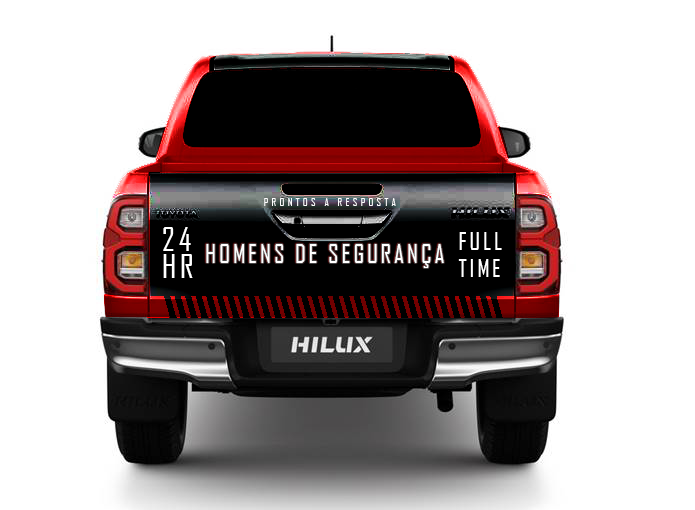
<style>
.page{position:relative;width:695px;height:510px;background:#ffffff}
.page>*{position:absolute;margin:0}
.t1{font:10.7px "AgencyFB-Reg";letter-spacing:0.32em;color:#fefefe}
.t2{font:32px/26.7px "AgencyFB-Reg";letter-spacing:0.12em;color:#ffffff}
.t3{font:24px/26.7px "AgencyFB-Reg";letter-spacing:0.12em;color:#ffffff}
.t4{font:24.7px "AgencyFB-Reg";letter-spacing:0.12em;color:#fffefe}
</style>
<div class="page">
<p class="t1" style="left:264px;top:198px;width:132px;height:8px">PRONTOS A RESPOSTA</p>
<p class="t2" style="left:163px;top:227px;width:30px;height:51px">24<br>HR</p>
<p class="t3" style="left:458px;top:232px;width:44px;height:45px">FULL<br>TIME</p>
<p class="t4" style="left:206px;top:244px;width:238px;height:24px">HOMENS DE SEGURANÇA</p>
</div>
